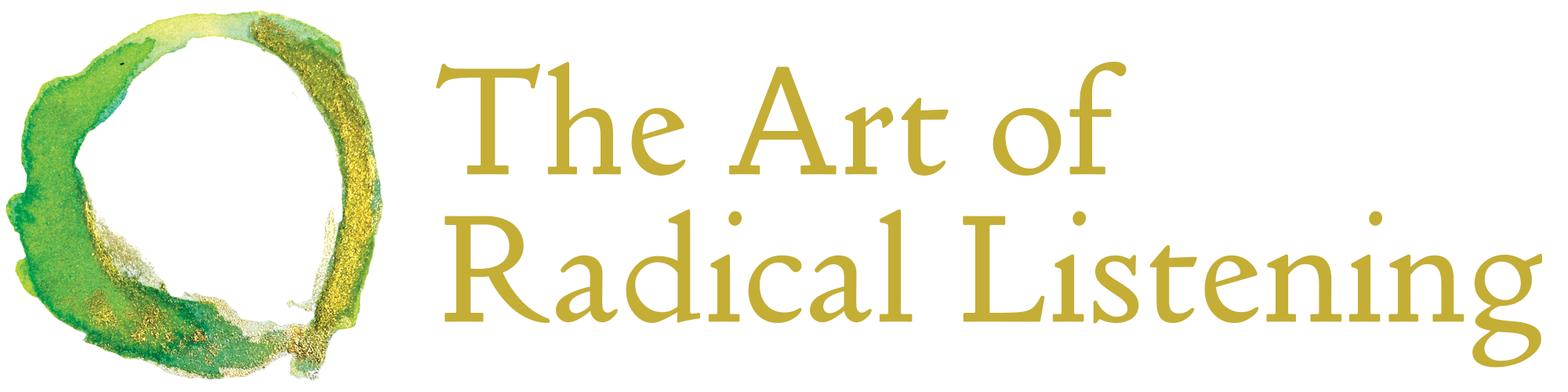
<style>
.page{position:relative;width:1568px;height:392px;background:#ffffff}
.page>*{position:absolute;margin:0}
.t1{font:163.3px/147px "DovesTypeText-Regular";letter-spacing:0.02em;color:#c4ae36}
</style>
<div class="page">
<p class="t1" style="left:436px;top:61px;width:1106px;height:307px">The Art of<br>Radical Listening</p>
</div>
